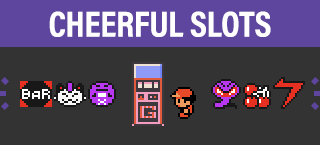
<style>
.page{position:relative;width:320px;height:145px;background:#333333}
.page>*{position:absolute;margin:0}
.t1{font:36.3px "AcuminProCond-Bold";color:#ffffff;text-transform:uppercase}
</style>
<div class="page">
<p class="t1" style="left:49px;top:11px;width:222px;height:26px">Cheerful Slots</p>
</div>
